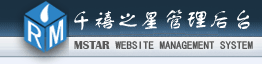
<style>
.page{position:relative;width:262px;height:64px}
.page>*{position:absolute;margin:0}
.t1{font:23px "FZSTK--GBK1-0";color:#ffffff}
.t2{font:12px "BritannicBold";color:#5a5a5a}
</style>
<div class="page">
<p class="t1" style="left:74px;top:9px;width:176px;height:22px">千禧之星管理后台</p>
<p class="t2" style="left:74px;top:41px;width:36px;height:8px">MSTAR</p>
</div>
